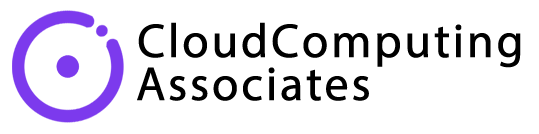
<style>
.page{position:relative;width:539px;height:134px;background:#ffffff}
.page>*{position:absolute;margin:0}
.t1{font:48px "MyriadPro-Regular";letter-spacing:0.035em;color:#000000;font-weight:bold}
</style>
<div class="page">
<p class="t1" style="left:138px;top:22px;width:383px;height:46px">CloudComputing</p>
<p class="t1" style="left:137px;top:67px;width:232px;height:34px">Associates</p>
</div>
